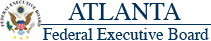
<style>
.page{position:relative;width:211px;height:41px;background:#ffffff}
.page>*{position:absolute;margin:0}
.t1{font:25px "Times-Roman";color:#00315a}
.t2{font:16.7px "Times-Roman";color:#00315a}
</style>
<div class="page">
<p class="t1" style="left:68px;top:3px;width:113px;height:17px">ATLANTA</p>
<p class="t2" style="left:43px;top:28px;width:166px;height:12px">Federal Executive Board</p>
</div>
